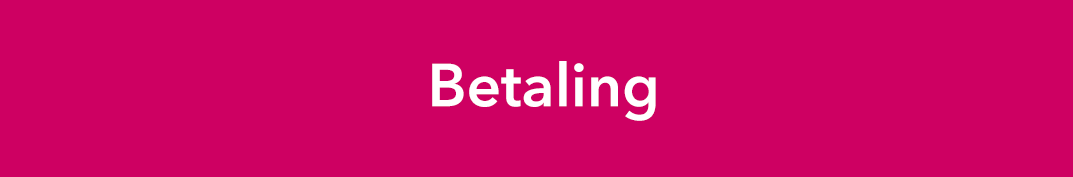
<style>
.page{position:relative;width:1073px;height:177px;background:#ce0062}
.page>*{position:absolute;margin:0}
.t1{font:60.1px "AvenirNext-DemiBold";color:#ffffff}
</style>
<div class="page">
<p class="t1" style="left:432px;top:61px;width:224px;height:60px">Betaling</p>
</div>
